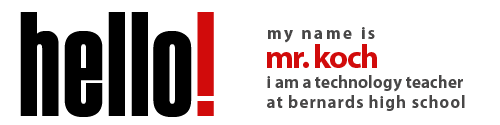
<style>
.page{position:relative;width:500px;height:125px;background:#ffffff}
.page>*{position:absolute;margin:0}
.t1{font:148.3px "Haettenschweiler";letter-spacing:0.025em;color:#000000;scale:0.78 1}
.t2{font:148.3px "Haettenschweiler";letter-spacing:0.025em;color:#d10b0b;scale:0.78 1}
.t3{font:17.4px "MyriadPro-Bold";letter-spacing:0.14em;color:#484747}
.t4{font:33.3px "MyriadPro-Bold";letter-spacing:-0.05em;color:#d10b0b}
.t5{font:17.2px/19.5px "MyriadPro-Bold";color:#484747}
.t6{font:17.2px/19.5px "MyriadPro-Bold";letter-spacing:0.05em;color:#484747}
</style>
<div class="page">
<p class="t1" style="left:20px;top:12px;width:194px;height:105px">hello<span class="t2">!</span></p>
<p class="t3" style="left:268px;top:27px;width:107px;height:16px">my name is</p>
<p class="t4" style="left:267px;top:44px;width:110px;height:24px">mr. koch</p>
<p class="t5" style="left:267px;top:75px;width:198px;height:36px">i am a technology teacher <br><span class="t6">at bernards high school</span></p>
</div>
